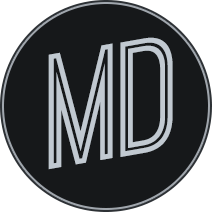
<style>
.page{position:relative;width:212px;height:212px;background:#16181a}
.page>*{position:absolute;margin:0}
.t1{font:169.4px "OstrichSansInline-Regular";color:#c1c9d1}
</style>
<div class="page">
<p class="t1" style="left:48px;top:37px;width:125px;height:133px;rotate:-10deg">md</p>
</div>
